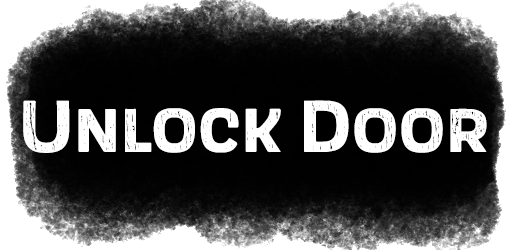
<style>
.page{position:relative;width:512px;height:250px;background:#ffffff}
.page>*{position:absolute;margin:0}
.t1{font:76px "ScarletWood-Bold";color:#ffffff;font-variant:small-caps}
</style>
<div class="page">
<p class="t1" style="left:23px;top:100px;width:464px;height:53px">Unlock Door</p>
</div>
